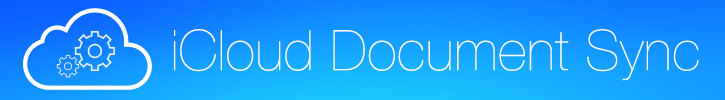
<style>
.page{position:relative;width:725px;height:100px}
.page>*{position:absolute;margin:0}
.t1{font:56px "HelveticaNeue-UltraLight";letter-spacing:0.01em;color:#fdfdfd}
</style>
<div class="page">
<p class="t1" style="left:174px;top:29px;width:525px;height:52px">iCloud Document Sync</p>
</div>
